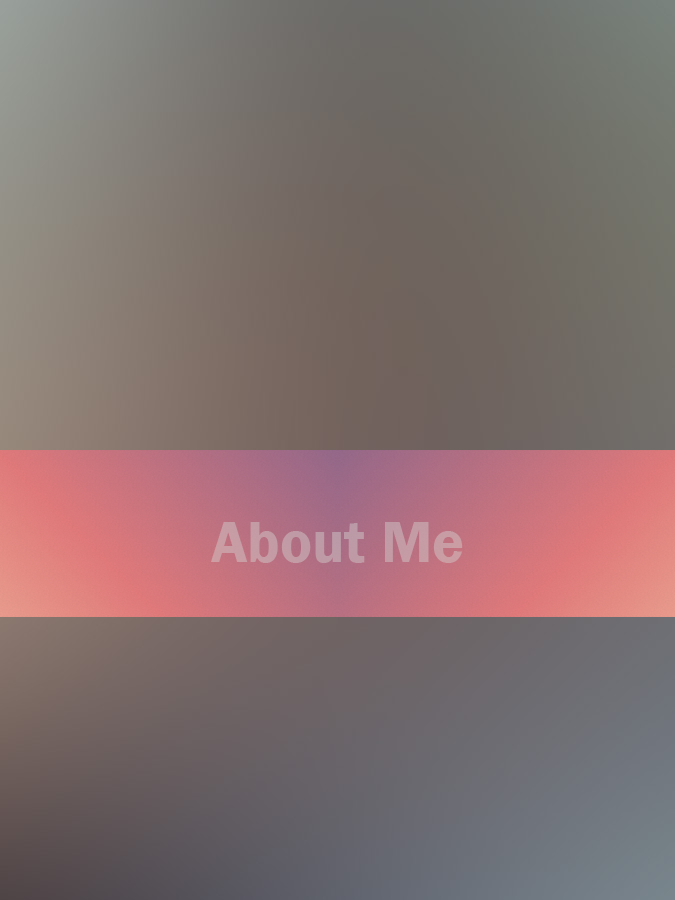
<style>
.page{position:relative;width:675px;height:900px}
.page>*{position:absolute;margin:0}
.t1{font:60px "FranklinGothic-Demi";color:#c49ba5}
</style>
<div class="page">
<p class="t1" style="left:211px;top:522px;width:252px;height:41px">About Me</p>
</div>
